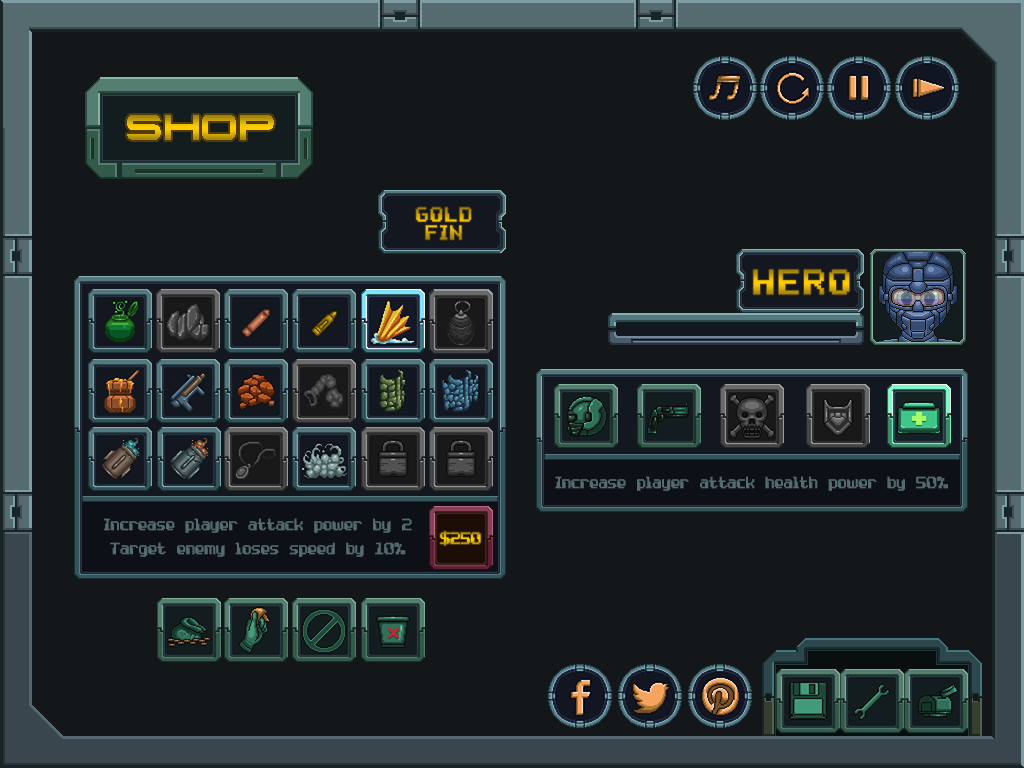
<style>
.page{position:relative;width:1024px;height:768px;background:#13171a}
.page>*{position:absolute;margin:0}
.t1{font:36px "InfiniumGuardian";letter-spacing:0.02em}
.t2{font:24px/18px "Computer Pixel-7";letter-spacing:0.1em;font-weight:bold}
.t3{font:42px "Computer Pixel-7";letter-spacing:0.1em;font-weight:bold}
.t4{font:20px "Computer Pixel-7";letter-spacing:0.02em;color:#556b6f;font-weight:bold}
.t5{font:20px "Computer Pixel-7";letter-spacing:0.01em;font-weight:bold}
</style>
<div class="page">
<p class="t1" style="left:127px;top:115px;width:147px;height:25px">SHOP</p>
<p class="t2" style="left:416px;top:207px;width:55px;height:33px;text-align:center">GOLD<br>FIN</p>
<p class="t3" style="left:753px;top:269px;width:97px;height:26px">HERO</p>
<p class="t4" style="left:555px;top:476px;width:393px;height:15px">Increase player attack health power by 50%</p>
<p class="t4" style="left:104px;top:518px;width:308px;height:39px;text-align:center">Increase player attack power by 2<br>Target enemy loses speed by 10%</p>
<p class="t5" style="left:440px;top:531px;width:41px;height:15px">$250</p>
</div>
